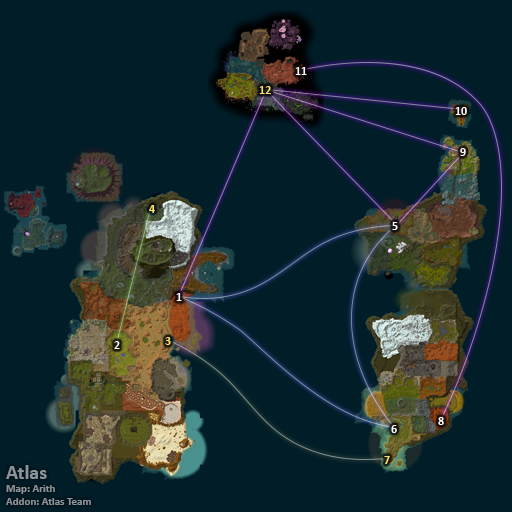
<style>
.page{position:relative;width:512px;height:512px;background:#001d28}
.page>*{position:absolute;margin:0}
.t1{font:12px "Calibri-Bold";color:#ffffff}
.t2{font:12px "Calibri-Bold";color:#fee570}
.t3{font:11px "Calibri-Bold";color:#8d9396}
.t4{font:20px "Calibri-Bold";color:#8d9396}
</style>
<div class="page">
<p class="t1" style="left:295px;top:67px;width:12px;height:8px">11</p>
<p class="t2" style="left:259px;top:86px;width:12px;height:8px">12</p>
<p class="t1" style="left:455px;top:107px;width:12px;height:8px">10</p>
<p class="t1" style="left:460px;top:148px;width:6px;height:8px">9</p>
<p class="t2" style="left:149px;top:205px;width:6px;height:8px">4</p>
<p class="t1" style="left:392px;top:222px;width:6px;height:8px">5</p>
<p class="t1" style="left:176px;top:293px;width:6px;height:8px">1</p>
<p class="t1" style="left:114px;top:341px;width:6px;height:8px">2</p>
<p class="t2" style="left:165px;top:337px;width:6px;height:8px">3</p>
<p class="t1" style="left:391px;top:425px;width:6px;height:8px">6</p>
<p class="t1" style="left:438px;top:417px;width:6px;height:8px">8</p>
<p class="t2" style="left:384px;top:456px;width:6px;height:8px">7</p>
<p class="t3" style="left:6px;top:465px;width:85px;height:40px"><span class="t4">Atlas<br></span>Map: Arith<br>Addon: Atlas Team</p>
</div>
